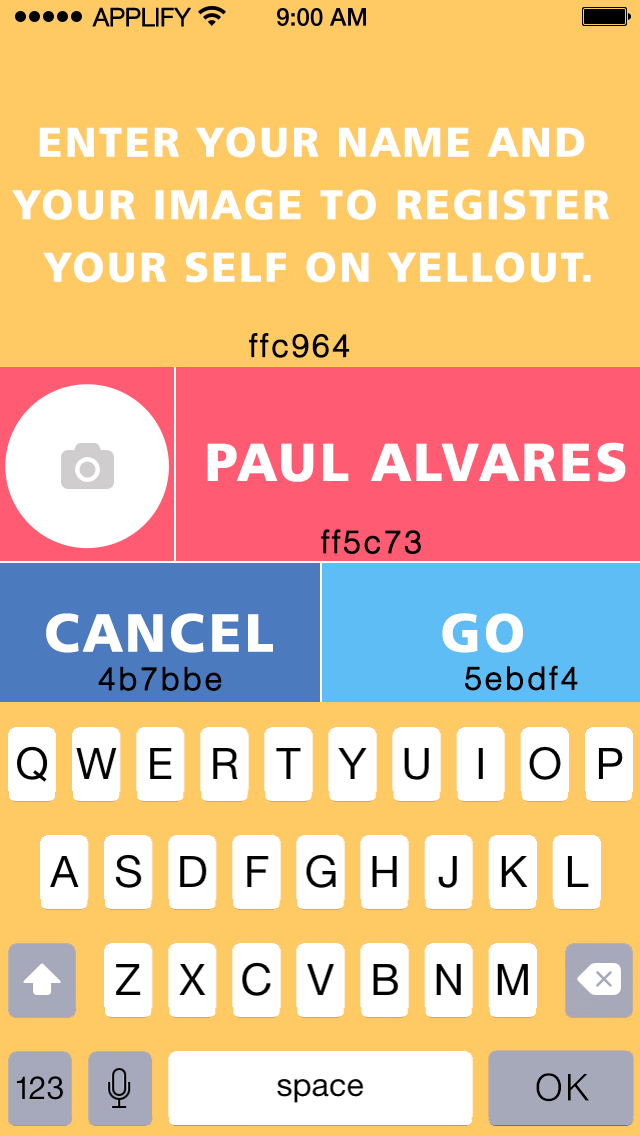
<style>
.page{position:relative;width:640px;height:1136px;background:#ffc964}
.page>*{position:absolute;margin:0}
.t1{font:25px "HelveticaNeueLTCom-Lt";letter-spacing:-0.02em;color:#000000;font-weight:bold}
.t2{font:70.8px/62.5px "Humanist777BT-BlackB";letter-spacing:0.06em;color:#ffffff}
.t3{font:54.2px "HelveticaLTStd-Light";letter-spacing:0.06em;color:#000000;font-weight:bold}
.t4{font:91.7px "Humanist777BT-BlackB";letter-spacing:0.06em;color:#ffffff}
.t5{font:62.5px "HelveticaLTStd-Light";letter-spacing:0.06em;color:#000000}
</style>
<div class="page">
<p class="t1" style="left:92px;top:7px;width:99px;height:20px">APPLIFY</p>
<p class="t2" style="left:12px;top:127px;width:597px;height:156px;text-align:center">ENTER YOUR NAME AND <br>YOUR IMAGE TO REGISTER <br>YOUR SELF ON YELLOUT.</p>
<p class="t3" style="left:249px;top:333px;width:101px;height:25px">ffc964</p>
<p class="t4" style="left:207px;top:442px;width:419px;height:40px">PAUL ALVARES</p>
<p class="t3" style="left:321px;top:529px;width:100px;height:25px">ff5c73</p>
<p class="t4" style="left:46px;top:613px;width:227px;height:40px">CANCEL</p>
<p class="t4" style="left:46px;top:613px;width:227px;height:40px">CANCEL</p>
<p class="t4" style="left:442px;top:613px;width:81px;height:40px">GO</p>
<p class="t3" style="left:465px;top:665px;width:113px;height:26px">5ebdf4</p>
<p class="t3" style="left:98px;top:666px;width:124px;height:25px">4b7bbe</p>
<p class="t5" style="left:536px;top:1073px;width:53px;height:29px">OK</p>
</div>
